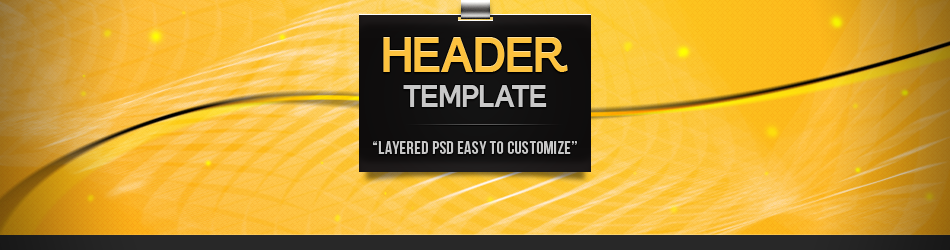
<style>
.page{position:relative;width:950px;height:250px}
.page>*{position:absolute;margin:0}
.t1{font:48px "GogatingBook-ExtraBold";color:#fdc23e}
.t2{font:30px "GogatingBook-ExtraBold";color:#c8c8c8}
.t3{font:18px "BebasNeue";letter-spacing:0.02em;color:#c8c7c7}
</style>
<div class="page">
<p class="t1" style="left:383px;top:37px;width:185px;height:35px">HEADER</p>
<p class="t2" style="left:403px;top:85px;width:144px;height:22px">TEMPLATE</p>
<p class="t3" style="left:372px;top:141px;width:205px;height:13px">“Layered PSD easy to customize”</p>
</div>
